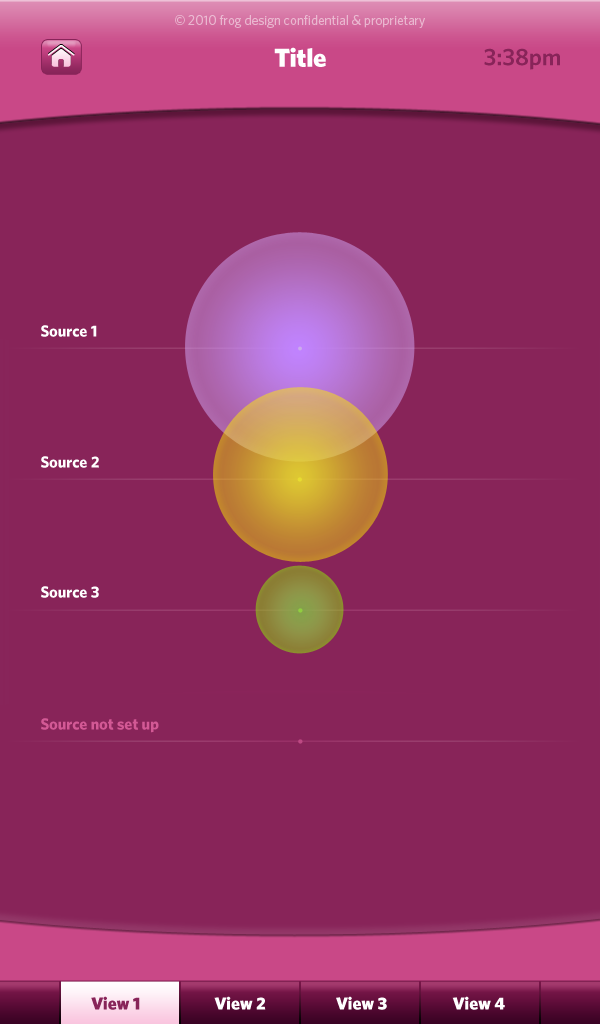
<style>
.page{position:relative;width:600px;height:1024px;background:#882459}
.page>*{position:absolute;margin:0}
.t1{font:13.3px "Whitney-Book";color:#eab7d0}
.t2{font:26px "Whitney-Black";color:#f0f0f0}
.t3{font:24px "Whitney-Semibold";color:#882459}
.t4{font:16px "Whitney-Bold";color:#ffffff}
.t5{font:16px "Whitney-Bold";color:#c94887}
.t6{font:17.5px "Whitney-Black";color:#882459}
.t7{font:17.5px "Whitney-Black";color:#ffffff}
</style>
<div class="page">
<p class="t1" style="left:175px;top:15px;width:250px;height:13px">© 2010 frog design confidential &amp; proprietary</p>
<p class="t2" style="left:274px;top:47px;width:52px;height:20px">Title</p>
<p class="t3" style="left:484px;top:48px;width:76px;height:22px">3:38pm</p>
<p class="t4" style="left:41px;top:325px;width:56px;height:12px">Source 1</p>
<p class="t4" style="left:41px;top:456px;width:58px;height:12px">Source 2</p>
<p class="t4" style="left:41px;top:586px;width:58px;height:12px">Source 3</p>
<p class="t5" style="left:41px;top:718px;width:118px;height:15px">Source not set up</p>
<p class="t6" style="left:91px;top:996px;width:49px;height:14px">View 1</p>
<p class="t7" style="left:214px;top:996px;width:52px;height:14px">View 2</p>
<p class="t7" style="left:336px;top:996px;width:51px;height:14px">View 3</p>
<p class="t7" style="left:452px;top:996px;width:53px;height:14px">View 4</p>
</div>
